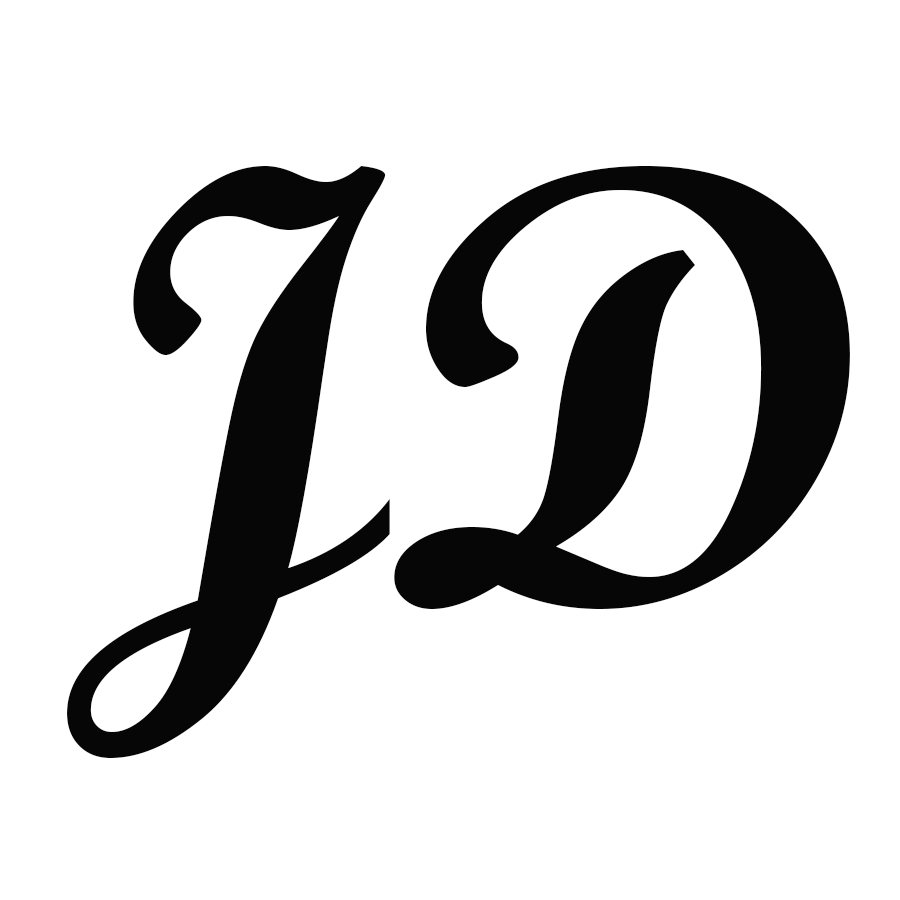
<style>
.page{position:relative;width:900px;height:900px;background:#ffffff}
.page>*{position:absolute;margin:0}
.t1{font:625px "ScriptMTBold";color:#060606}
</style>
<div class="page">
<p class="t1" style="left:67px;top:165px;width:783px;height:593px">JD</p>
</div>
